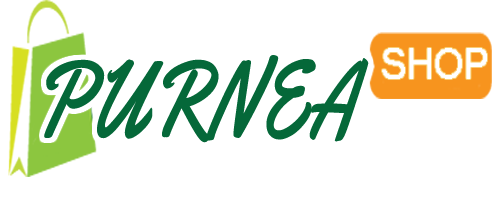
<style>
.page{position:relative;width:500px;height:200px;background:#ffffff}
.page>*{position:absolute;margin:0}
.t1{font:43.1px "MS Sans Serif";color:#ffffff;scale:0.89 1}
.t2{font:110.8px "Yellowtail";color:#056839;scale:0.72 1}
</style>
<div class="page">
<p class="t1" style="left:382px;top:48px;width:105px;height:31px">SHOP</p>
<p class="t2" style="left:44px;top:55px;width:325px;height:88px">PURNEA</p>
</div>
